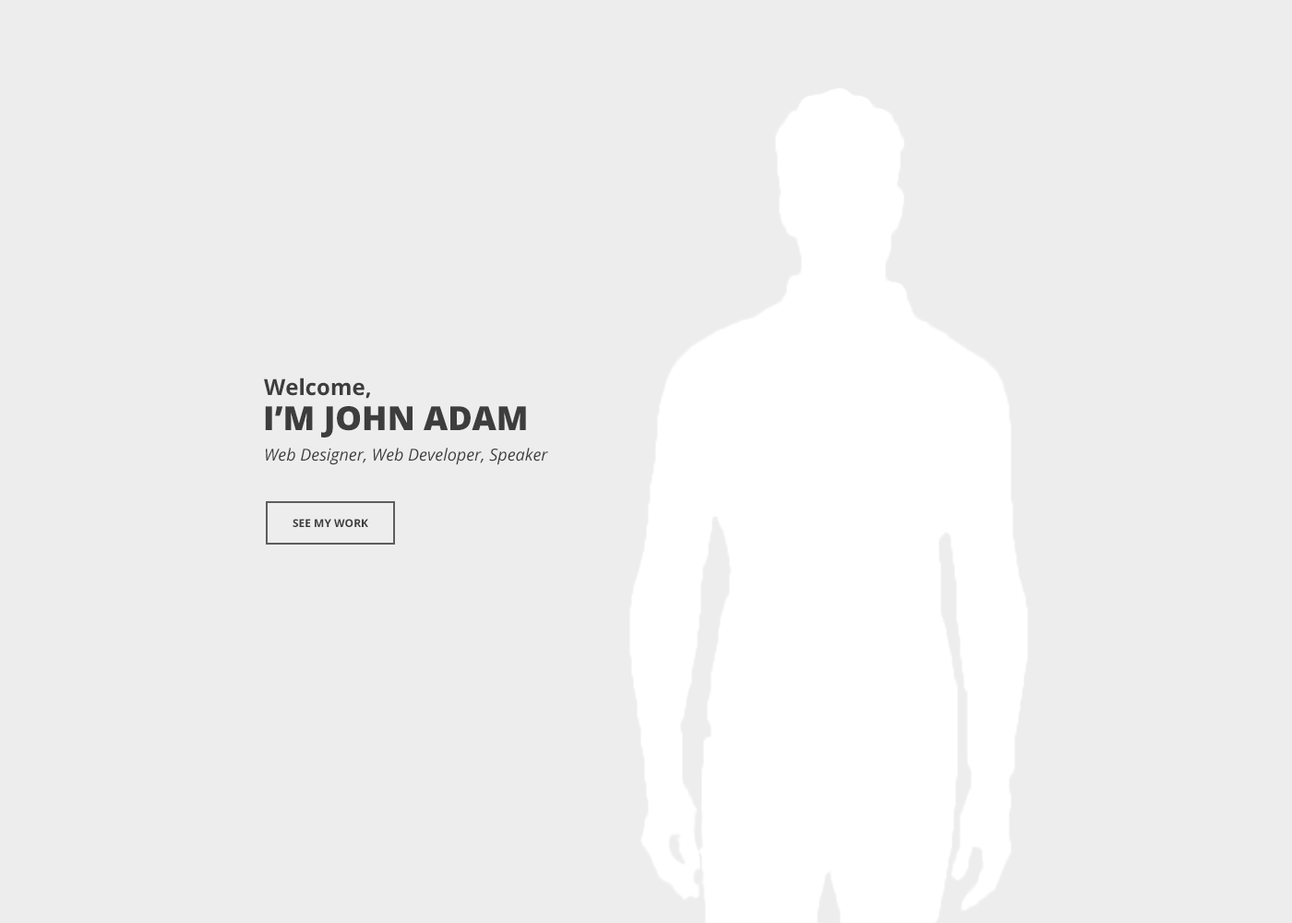
<style>
.page{position:relative;width:1292px;height:923px;background:#ededed}
.page>*{position:absolute;margin:0}
.t1{font:22.1px "OpenSans-Bold";color:#3d3d3d}
.t2{font:33.2px "OpenSans-Extrabold";color:#3d3d3d}
.t3{font:16.6px "OpenSans-Italic";color:#3d3d3d}
.t4{font:11.1px "OpenSans-Bold";color:#3d3d3d}
</style>
<div class="page">
<p class="t1" style="left:264px;top:377px;width:106px;height:22px">Welcome,</p>
<p class="t2" style="left:265px;top:406px;width:261px;height:31px">I’M JOHN ADAM</p>
<p class="t3" style="left:266px;top:448px;width:282px;height:17px">Web Designer, Web Developer, Speaker</p>
<p class="t4" style="left:293px;top:519px;width:75px;height:8px">SEE MY WORK</p>
</div>
